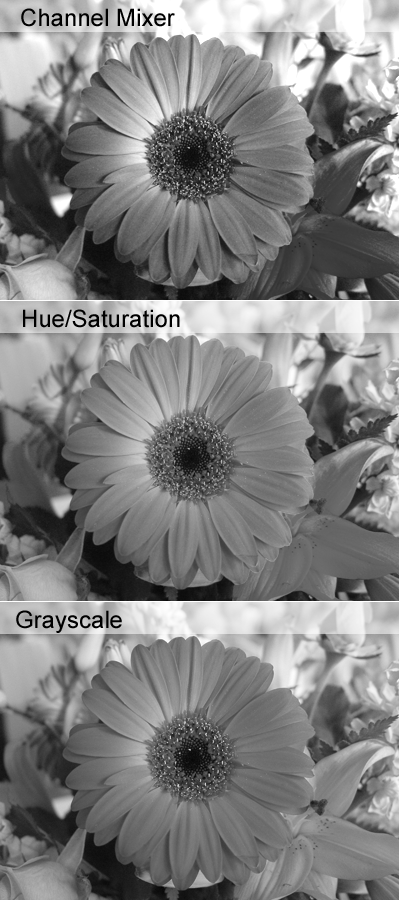
<style>
.page{position:relative;width:399px;height:900px}
.page>*{position:absolute;margin:0}
.t1{font:24px "ArialMT";color:#000000}
</style>
<div class="page">
<p class="t1" style="left:21px;top:8px;width:154px;height:19px">Channel Mixer</p>
<p class="t1" style="left:23px;top:309px;width:157px;height:19px">Hue/Saturation</p>
<p class="t1" style="left:16px;top:610px;width:106px;height:23px">Grayscale</p>
</div>
